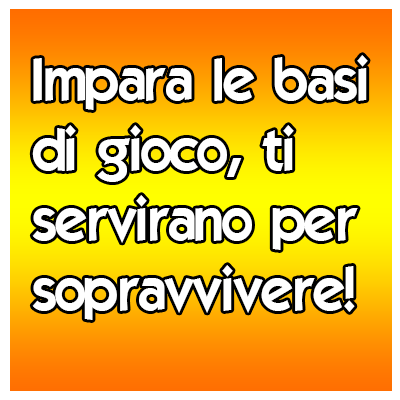
<style>
.page{position:relative;width:400px;height:400px;background:#ffffff}
.page>*{position:absolute;margin:0}
.t1{font:58.3px "ELEGANCE";color:#ffffff}
</style>
<div class="page">
<p class="t1" style="left:32px;top:55px;width:336px;height:265px">Impara le basi<br>di gioco, ti<br>servirano per<br>sopravvivere!</p>
</div>
